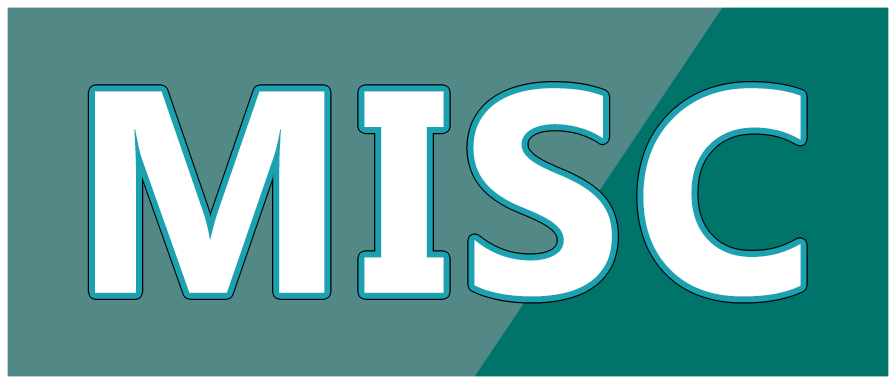
<style>
.page{position:relative;width:896px;height:384px;background:#528987}
.page>*{position:absolute;margin:0}
.t1{font:287.1px "Gadugi-Bold";letter-spacing:0.04em;color:#ffffff}
</style>
<div class="page">
<p class="t1" style="left:95px;top:88px;width:706px;height:209px">MISC</p>
</div>
